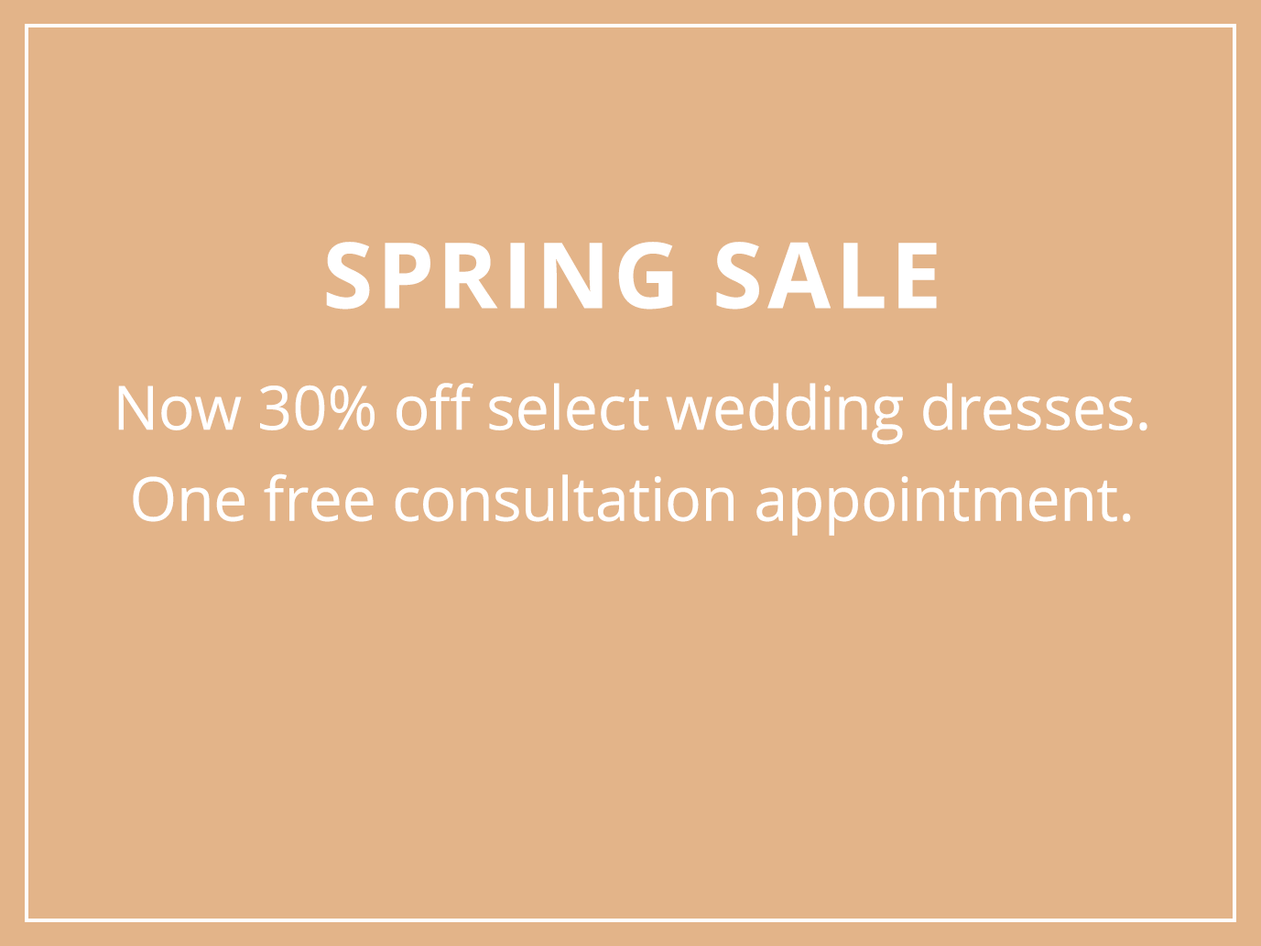
<style>
.page{position:relative;width:1261px;height:946px;background:#e3b489}
.page>*{position:absolute;margin:0}
.t1{font:60.8px/121.6px "OpenSans";color:#ffffff}
.t2{font:91.2px/91.2px "OpenSans-Bold";letter-spacing:0.05em;color:#ffffff;text-transform:uppercase}
.t3{font:60.8px/91.2px "OpenSans";color:#ffffff}
</style>
<div class="page">
<p class="t1" style="left:118px;top:242px;width:1029px;height:294px;text-align:center"><span class="t2">Spring Sale<br></span>Now 30% off select wedding dresses.<br><span class="t3">One free consultation appointment.</span></p>
</div>
